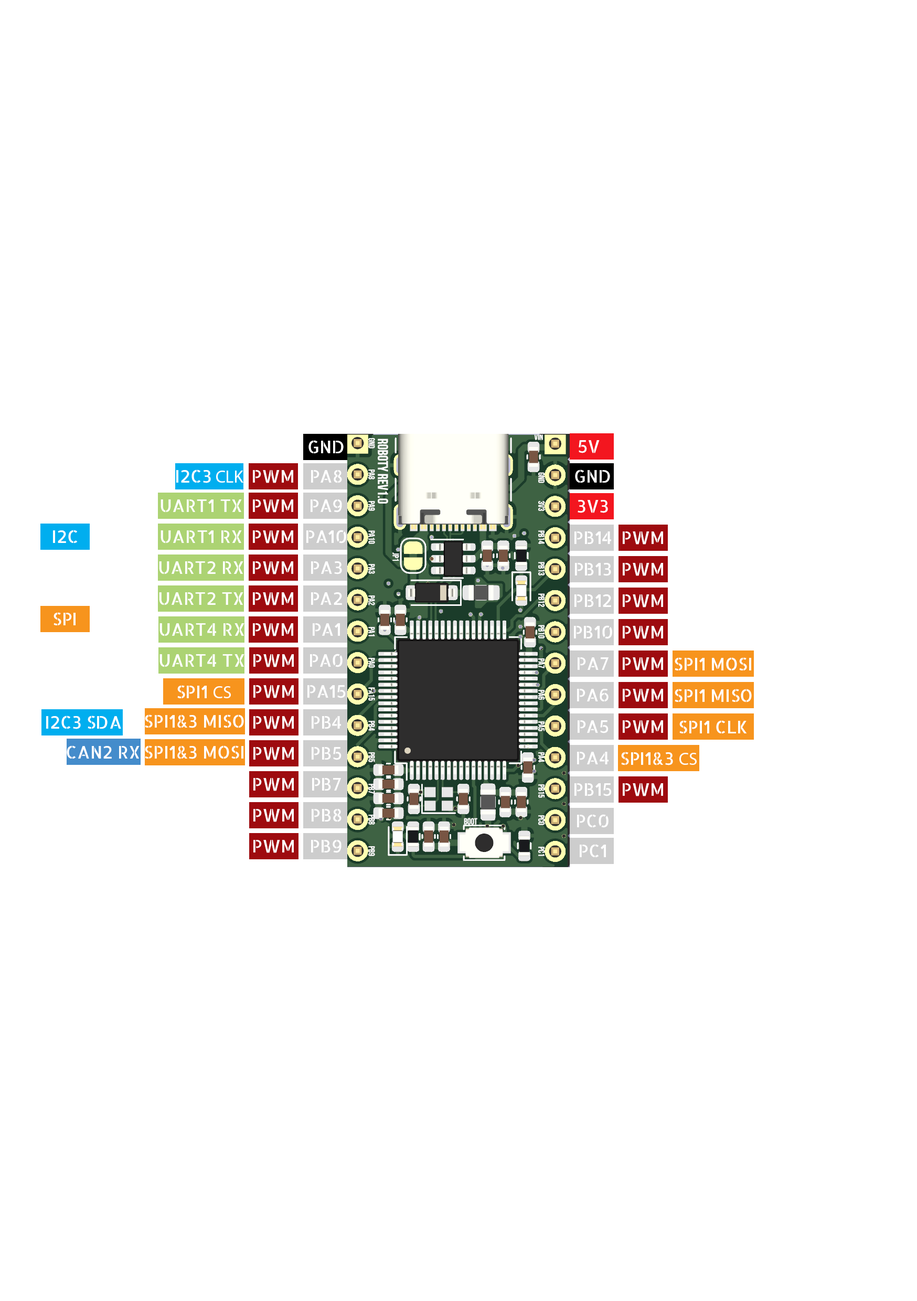
<style>
.page{position:relative;width:917px;height:1301px;background:#ffffff}
.page>*{position:absolute;margin:0}
.t1{font:17.5px "AllertaStencil-Regular";color:#ffffff}
.t2{font:17.5px "MyriadPro-Regular";color:#ffffff}
</style>
<div class="page">
<p class="t1" style="left:308px;top:440px;width:36px;height:14px">GND</p>
<p class="t1" style="left:578px;top:440px;width:21px;height:13px">5V</p>
<p class="t1" style="left:176px;top:469px;width:67px;height:14px">I2C3<span class="t2"> CLK</span></p>
<p class="t1" style="left:253px;top:470px;width:40px;height:13px">PWM</p>
<p class="t1" style="left:311px;top:470px;width:31px;height:13px">PA8</p>
<p class="t1" style="left:575px;top:469px;width:35px;height:14px">GND</p>
<p class="t1" style="left:160px;top:499px;width:82px;height:13px">UART1_TX</p>
<p class="t1" style="left:253px;top:499px;width:40px;height:13px">PWM</p>
<p class="t1" style="left:310px;top:499px;width:32px;height:13px">PA9</p>
<p class="t1" style="left:577px;top:500px;width:31px;height:13px">3V3</p>
<p class="t1" style="left:53px;top:530px;width:25px;height:13px">I2C</p>
<p class="t1" style="left:160px;top:530px;width:82px;height:13px">UART1_RX</p>
<p class="t1" style="left:253px;top:530px;width:40px;height:13px">PWM</p>
<p class="t1" style="left:306px;top:530px;width:40px;height:13px">PA10</p>
<p class="t1" style="left:574px;top:531px;width:37px;height:13px">PB14</p>
<p class="t1" style="left:623px;top:531px;width:40px;height:13px">PWM</p>
<p class="t1" style="left:159px;top:561px;width:84px;height:13px">UART2_RX</p>
<p class="t1" style="left:253px;top:561px;width:40px;height:13px">PWM</p>
<p class="t1" style="left:311px;top:561px;width:31px;height:13px">PA3</p>
<p class="t1" style="left:575px;top:563px;width:36px;height:13px">PB13</p>
<p class="t1" style="left:623px;top:563px;width:40px;height:13px">PWM</p>
<p class="t1" style="left:159px;top:592px;width:84px;height:13px">UART2_TX</p>
<p class="t1" style="left:253px;top:592px;width:40px;height:13px">PWM</p>
<p class="t1" style="left:311px;top:592px;width:31px;height:13px">PA2</p>
<p class="t1" style="left:574px;top:594px;width:37px;height:13px">PB12</p>
<p class="t1" style="left:623px;top:594px;width:40px;height:13px">PWM</p>
<p class="t1" style="left:53px;top:612px;width:23px;height:14px">SPI</p>
<p class="t1" style="left:159px;top:623px;width:85px;height:13px">UART4_RX</p>
<p class="t1" style="left:253px;top:623px;width:40px;height:13px">PWM</p>
<p class="t1" style="left:313px;top:623px;width:27px;height:13px">PA1</p>
<p class="t1" style="left:574px;top:625px;width:38px;height:14px">PB10</p>
<p class="t1" style="left:623px;top:626px;width:40px;height:13px">PWM</p>
<p class="t1" style="left:310px;top:653px;width:32px;height:14px">PA0</p>
<p class="t1" style="left:159px;top:654px;width:85px;height:13px">UART4_TX</p>
<p class="t1" style="left:253px;top:654px;width:41px;height:13px">PWM</p>
<p class="t1" style="left:577px;top:657px;width:31px;height:13px">PA7</p>
<p class="t1" style="left:623px;top:657px;width:40px;height:13px">PWM</p>
<p class="t1" style="left:674px;top:657px;width:77px;height:14px">SPI1 MOSI</p>
<p class="t1" style="left:177px;top:685px;width:54px;height:14px">SPI1 <span class="t2">CS</span></p>
<p class="t1" style="left:253px;top:685px;width:41px;height:13px">PWM</p>
<p class="t1" style="left:307px;top:685px;width:39px;height:13px">PA15</p>
<p class="t1" style="left:577px;top:689px;width:31px;height:13px">PA6</p>
<p class="t1" style="left:623px;top:689px;width:40px;height:13px">PWM</p>
<p class="t1" style="left:674px;top:689px;width:78px;height:13px">SPI1 MISO</p>
<p class="t1" style="left:46px;top:715px;width:75px;height:14px">I2C3 SDA</p>
<p class="t1" style="left:145px;top:714px;width:99px;height:14px">SPI1&amp;3 MISO</p>
<p class="t1" style="left:253px;top:716px;width:41px;height:13px">PWM</p>
<p class="t1" style="left:312px;top:716px;width:29px;height:12px">PB4</p>
<p class="t1" style="left:577px;top:720px;width:31px;height:13px">PA5</p>
<p class="t1" style="left:623px;top:720px;width:40px;height:13px">PWM</p>
<p class="t1" style="left:679px;top:720px;width:68px;height:14px">SPI1 CLK</p>
<p class="t1" style="left:67px;top:745px;width:73px;height:14px">CAN2 RX</p>
<p class="t1" style="left:145px;top:745px;width:98px;height:14px">SPI1&amp;3 MOSI</p>
<p class="t1" style="left:253px;top:747px;width:41px;height:13px">PWM</p>
<p class="t1" style="left:312px;top:747px;width:29px;height:13px">PB5</p>
<p class="t1" style="left:577px;top:752px;width:31px;height:12px">PA4</p>
<p class="t1" style="left:621px;top:752px;width:75px;height:13px">SPI1&amp;3 <span class="t2">CS</span></p>
<p class="t1" style="left:253px;top:778px;width:41px;height:13px">PWM</p>
<p class="t1" style="left:312px;top:778px;width:29px;height:12px">PB7</p>
<p class="t1" style="left:574px;top:783px;width:38px;height:13px">PB15</p>
<p class="t1" style="left:623px;top:783px;width:40px;height:13px">PWM</p>
<p class="t1" style="left:253px;top:809px;width:41px;height:13px">PWM</p>
<p class="t1" style="left:312px;top:809px;width:29px;height:13px">PB8</p>
<p class="t1" style="left:577px;top:814px;width:31px;height:14px">PC0</p>
<p class="t1" style="left:253px;top:840px;width:41px;height:13px">PWM</p>
<p class="t1" style="left:311px;top:840px;width:30px;height:13px">PB9</p>
<p class="t1" style="left:580px;top:844px;width:26px;height:14px">PC1</p>
</div>
